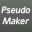
<style>
.page{position:relative;width:32px;height:32px}
.page>*{position:absolute;margin:0}
.t1{font:9px "Alef-Regular";color:#ffffff;font-style:italic}
</style>
<div class="page">
<p class="t1" style="left:1px;top:6px;width:30px;height:19px;text-align:center">Pseudo<br>Maker</p>
</div>
